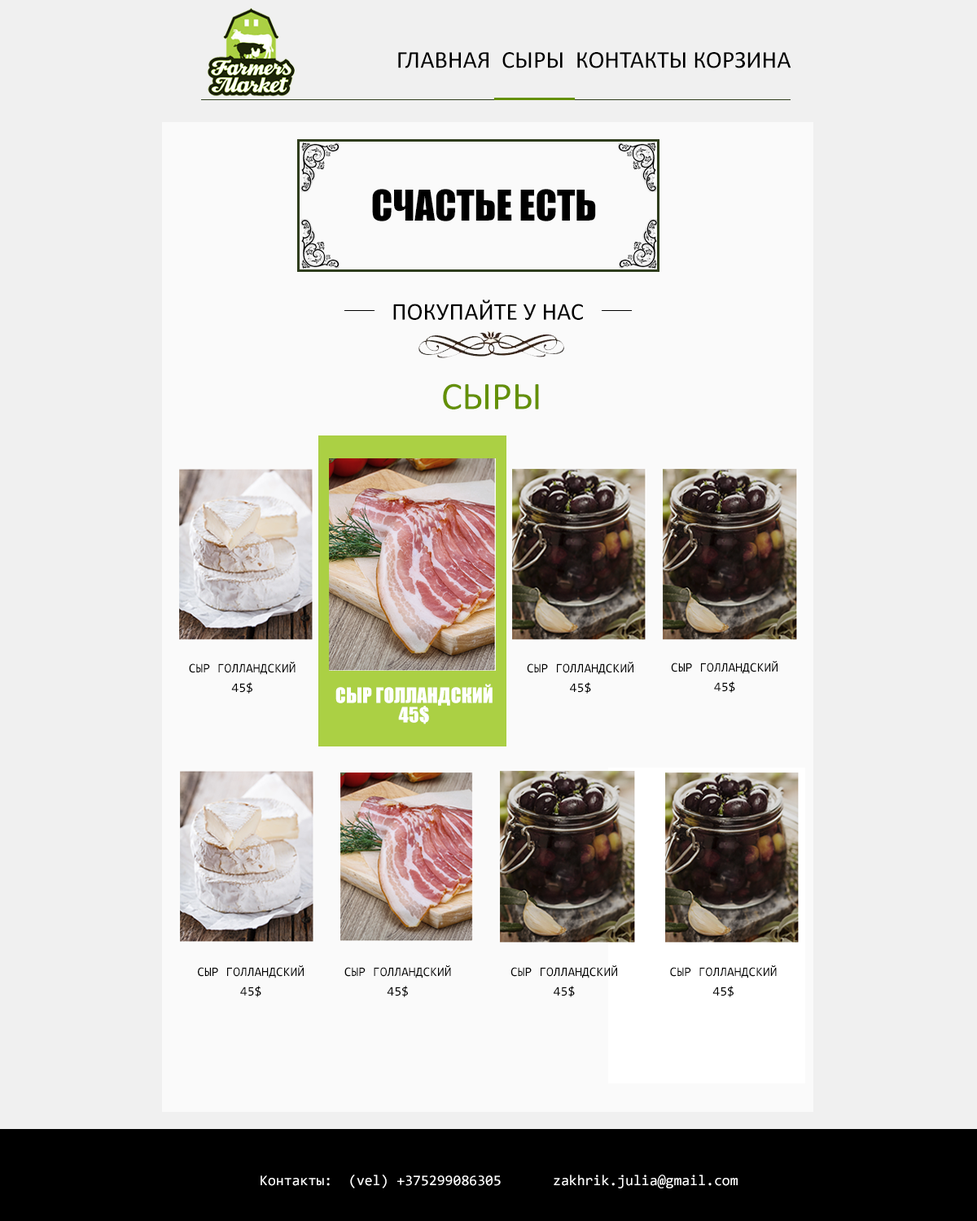
<style>
.page{position:relative;width:977px;height:1221px;background:#f0f0f0}
.page>*{position:absolute;margin:0}
.t1{font:24.4px "Calibri";color:#000000;text-transform:uppercase}
.t2{font:39.1px "Impact";color:#000000;text-transform:uppercase}
.t3{font:39.1px "Calibri";color:#649004;text-transform:uppercase}
.t4{font:13px/19.5px "Consolas";color:#000000;text-transform:uppercase}
.t5{font:19.5px/19.5px "Impact";color:#ffffff;text-transform:uppercase}
.t6{font:14.7px "Consolas";color:#ffffff}
</style>
<div class="page">
<p class="t1" style="left:398px;top:52px;width:392px;height:16px">Главная  сыры  контакты корзина</p>
<p class="t2" style="left:372px;top:189px;width:224px;height:32px">счастье есть</p>
<p class="t1" style="left:393px;top:300px;width:190px;height:20px">Покупайте у нас</p>
<p class="t3" style="left:443px;top:383px;width:96px;height:26px">сыры</p>
<p class="t4" style="left:189px;top:662px;width:106px;height:31px;text-align:center">сыр голландский 45$</p>
<p class="t4" style="left:527px;top:662px;width:106px;height:31px;text-align:center">сыр голландский 45$</p>
<p class="t4" style="left:671px;top:661px;width:106px;height:32px;text-align:center">сыр голландский 45$</p>
<p class="t5" style="left:335px;top:684px;width:157px;height:40px;text-align:center">сыр голландский 45$</p>
<p class="t4" style="left:198px;top:965px;width:106px;height:32px;text-align:center">сыр голландский 45$</p>
<p class="t4" style="left:344px;top:965px;width:107px;height:32px;text-align:center">сыр голландский 45$</p>
<p class="t4" style="left:510px;top:965px;width:107px;height:32px;text-align:center">сыр голландский 45$</p>
<p class="t4" style="left:670px;top:965px;width:106px;height:32px;text-align:center">сыр голландский 45$</p>
<p class="t6" style="left:260px;top:1174px;width:477px;height:14px">Контакты:  (vel) +375299086305  zakhrik.julia@gmail.com</p>
</div>
